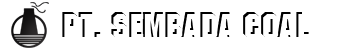
<style>
.page{position:relative;width:350px;height:50px;background:#ffffff}
.page>*{position:absolute;margin:0}
.t1{font:35.5px "MachineITCbyBT-Regular";scale:1.07 1}
.t2{font:35.5px "MachineITCbyBT-Regular";color:#ffffff;scale:1.07 1}
</style>
<div class="page">
<p class="t1" style="left:62px;top:12px;width:247px;height:25px">pt. sembada coal</p>
<p class="t2" style="left:64px;top:14px;width:247px;height:25px">pt. sembada coal</p>
</div>
